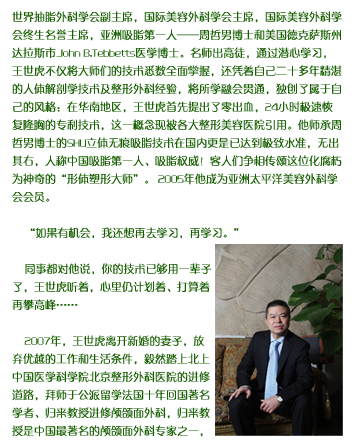
<style>
.page{position:relative;width:357px;height:447px;background:#ffffff}
.page>*{position:absolute;margin:0}
.t1{font:11px/18px "FZZQJW--GB1-0";color:#196003}
</style>
<div class="page">
<p class="t1" style="left:12px;top:11px;width:330px;height:426px">世界抽脂外科学会副主席，国际美容外科学会主席，国际美容外科学会终生名誉主席，亚洲吸脂第一人——周哲男博士和美国德克萨斯州达拉斯市John B.Tebbetts医学博士。名师出高徒，通过潜心学习，王世虎不仅将大师们的技术悉数全面掌握，还凭着自己二十多年精湛的人体解剖学技术及整形外科经验，将所学融会贯通，独创了属于自己的风格：在华南地区，王世虎首先提出了零出血，24小时极速恢复隆胸的专利技术，这一概念现被各大整形美容医院引用。他师承周哲男博士的SHU立体无痕吸脂技术在国内更是已达到极致水准，无出其右，人称中国吸脂第一人、吸脂权威！客人们争相传颂这位化腐朽为神奇的“形体塑形大师”。 2005年他成为亚洲太平洋美容外科学会会员。<br><br>    “如果有机会，我还想再去学习，再学习。”<br><br>    同事都对他说，你的技术已够用一辈子<br>了，王世虎听着，心里仍计划着、打算着<br>再攀高峰……<br><br>    2007年，王世虎离开新婚的妻子，放<br>弃优越的工作和生活条件，毅然踏上北上<br>中国医学科学院北京整形外科医院的进修<br>道路，拜师于公派留学法国十年回国著名<br>学者、归来教授进修颅颌面外科，归来教<br>授是中国最著名的颅颌面外科专家之一，</p>
</div>
